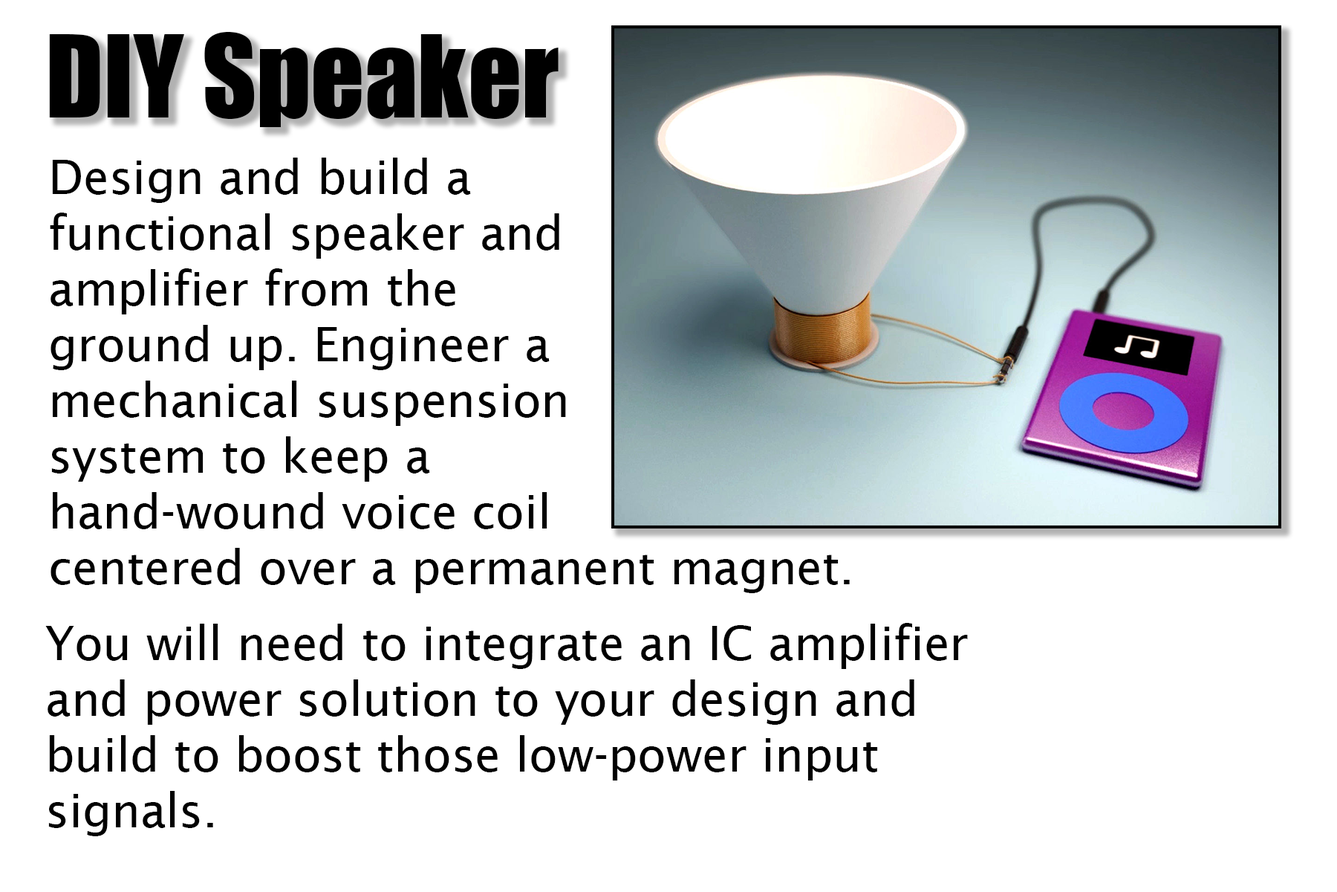
<style>
.page{position:relative;width:1337px;height:892px;background:#ffffff}
.page>*{position:absolute;margin:0}
.t1{font:105.3px "Impact";color:#000000}
.t2{font:46.4px "LucidaSans";color:#000000}
</style>
<div class="page">
<p class="t1" style="left:49px;top:32px;width:510px;height:95px">DIY Speaker</p>
<p class="t2" style="left:50px;top:158px;width:800px;height:435px">Design and build a <br>functional speaker and <br>amplifier from the <br>ground up. Engineer a <br>mechanical suspension<br>system to keep a <br>hand-wound voice coil <br>centered over a permanent magnet.</p>
<p class="t2" style="left:45px;top:623px;width:923px;height:213px">You will need to integrate an IC amplifier<br>and power solution to your design and<br>build to boost those low-power input <br>signals.</p>
</div>
